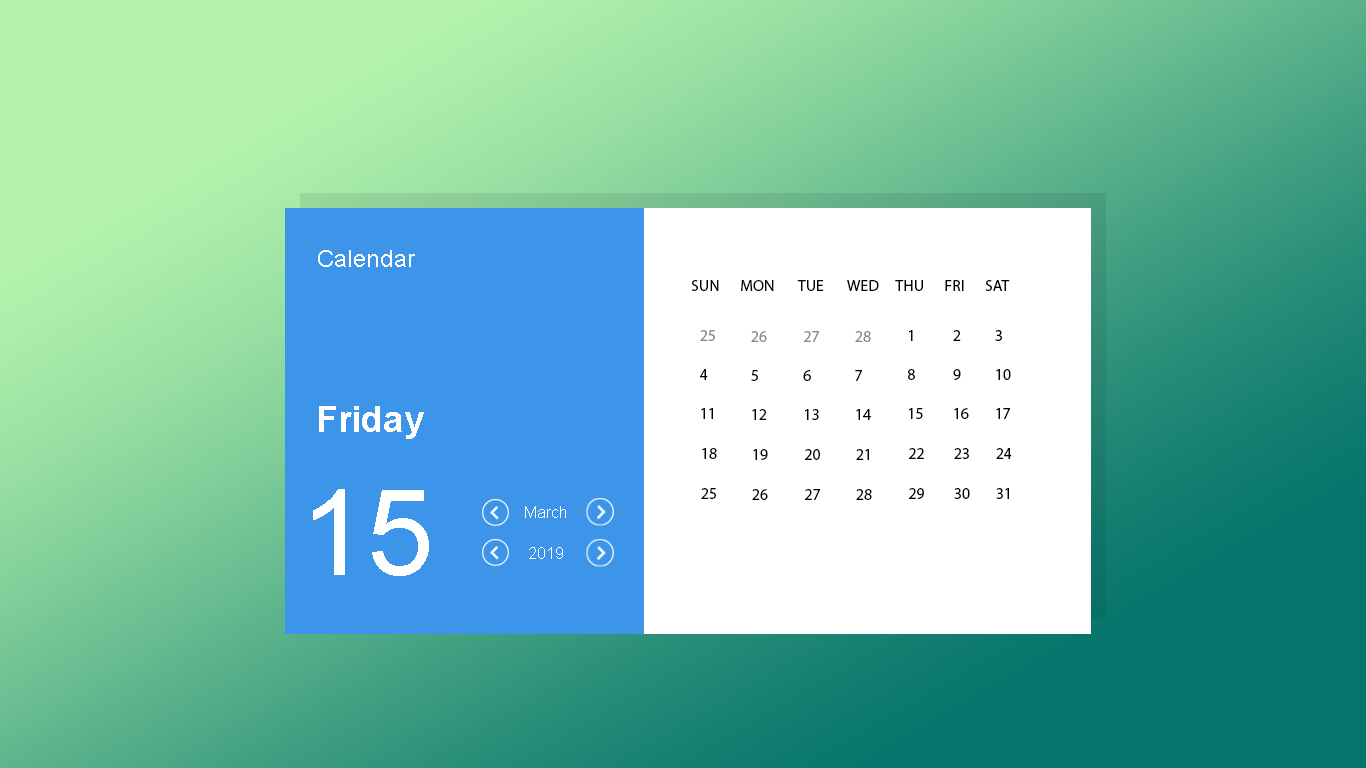
<style>
.page{position:relative;width:1366px;height:768px}
.page>*{position:absolute;margin:0}
.t1{font:24px "ArialMT";color:#ffffff}
.t2{font:16px "MyriadPro-Regular";color:#000000}
.t3{font:16px "MyriadPro-Regular";color:#888888}
.t4{font:36px "Arial-BoldMT";color:#ffffff}
.t5{font:120px "ArialMT";color:#ffffff}
.t6{font:16px "ArialMT";color:#ffffff}
</style>
<div class="page">
<p class="t1" style="left:318px;top:250px;width:97px;height:17px">Calendar</p>
<p class="t2" style="left:691px;top:280px;width:319px;height:11px">SUN      MON       TUE       WED     THU      FRI      SAT</p>
<p class="t3" style="left:700px;top:330px;width:15px;height:11px">25</p>
<p class="t3" style="left:751px;top:331px;width:16px;height:11px">26</p>
<p class="t3" style="left:804px;top:331px;width:15px;height:11px">27</p>
<p class="t3" style="left:855px;top:331px;width:16px;height:11px">28</p>
<p class="t2" style="left:909px;top:330px;width:4px;height:11px">1</p>
<p class="t2" style="left:953px;top:330px;width:8px;height:11px">2</p>
<p class="t2" style="left:995px;top:330px;width:7px;height:11px">3</p>
<p class="t2" style="left:700px;top:369px;width:8px;height:11px">4</p>
<p class="t2" style="left:751px;top:370px;width:7px;height:11px">5</p>
<p class="t2" style="left:803px;top:370px;width:8px;height:11px">6</p>
<p class="t2" style="left:855px;top:370px;width:7px;height:11px">7</p>
<p class="t2" style="left:908px;top:369px;width:7px;height:11px">8</p>
<p class="t2" style="left:953px;top:369px;width:8px;height:11px">9</p>
<p class="t2" style="left:996px;top:369px;width:15px;height:11px">10</p>
<p class="t4" style="left:319px;top:406px;width:105px;height:33px">Friday</p>
<p class="t2" style="left:701px;top:408px;width:12px;height:11px">11</p>
<p class="t2" style="left:752px;top:409px;width:15px;height:11px">12</p>
<p class="t2" style="left:805px;top:409px;width:14px;height:11px">13</p>
<p class="t2" style="left:856px;top:409px;width:15px;height:11px">14</p>
<p class="t2" style="left:909px;top:408px;width:14px;height:11px">15</p>
<p class="t2" style="left:954px;top:408px;width:15px;height:11px">16</p>
<p class="t2" style="left:996px;top:408px;width:14px;height:11px">17</p>
<p class="t2" style="left:702px;top:448px;width:15px;height:11px">18</p>
<p class="t2" style="left:753px;top:449px;width:15px;height:11px">19</p>
<p class="t2" style="left:805px;top:449px;width:15px;height:11px">20</p>
<p class="t2" style="left:856px;top:449px;width:13px;height:11px">21</p>
<p class="t2" style="left:909px;top:448px;width:15px;height:11px">22</p>
<p class="t2" style="left:954px;top:448px;width:15px;height:11px">23</p>
<p class="t2" style="left:996px;top:448px;width:16px;height:11px">24</p>
<p class="t5" style="left:313px;top:489px;width:116px;height:87px">15</p>
<p class="t2" style="left:701px;top:488px;width:15px;height:11px">25</p>
<p class="t2" style="left:752px;top:489px;width:16px;height:11px">26</p>
<p class="t2" style="left:805px;top:489px;width:15px;height:11px">27</p>
<p class="t2" style="left:856px;top:489px;width:16px;height:11px">28</p>
<p class="t2" style="left:909px;top:488px;width:15px;height:11px">29</p>
<p class="t2" style="left:954px;top:488px;width:16px;height:11px">30</p>
<p class="t2" style="left:996px;top:488px;width:13px;height:11px">31</p>
<p class="t6" style="left:525px;top:506px;width:41px;height:12px">March</p>
<p class="t6" style="left:529px;top:547px;width:34px;height:12px">2019</p>
</div>
